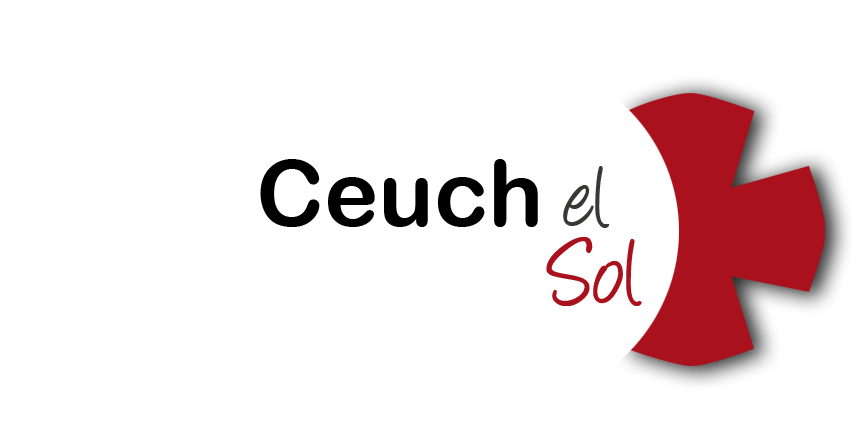
<style>
.page{position:relative;width:867px;height:430px;background:#ffffff}
.page>*{position:absolute;margin:0}
.t1{font:91.7px "ArialRoundedMTBold";color:#000000}
.t2{font:100px "Angelina";color:#383837}
.t3{font:108.3px "Angelina";color:#a9111c}
</style>
<div class="page">
<p class="t1" style="left:260px;top:159px;width:278px;height:68px">Ceuch</p>
<p class="t2" style="left:563px;top:166px;width:47px;height:62px">el</p>
<p class="t3" style="left:546px;top:237px;width:96px;height:69px">Sol</p>
</div>
